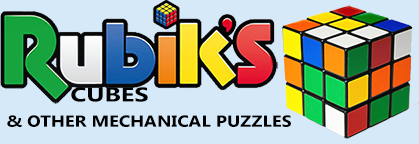
<style>
.page{position:relative;width:419px;height:144px;background:#d6e9f8}
.page>*{position:absolute;margin:0}
.t1{font:20px "KhmerUI-Bold";color:#000000;scale:1.27 1}
.t2{font:16px "KhmerUI-Bold";color:#000000;scale:1.14 1}
</style>
<div class="page">
<p class="t1" style="left:71px;top:87px;width:77px;height:15px">CUBES</p>
<p class="t2" style="left:7px;top:115px;width:284px;height:12px">&amp; OTHER MECHANICAL PUZZLES</p>
</div>
